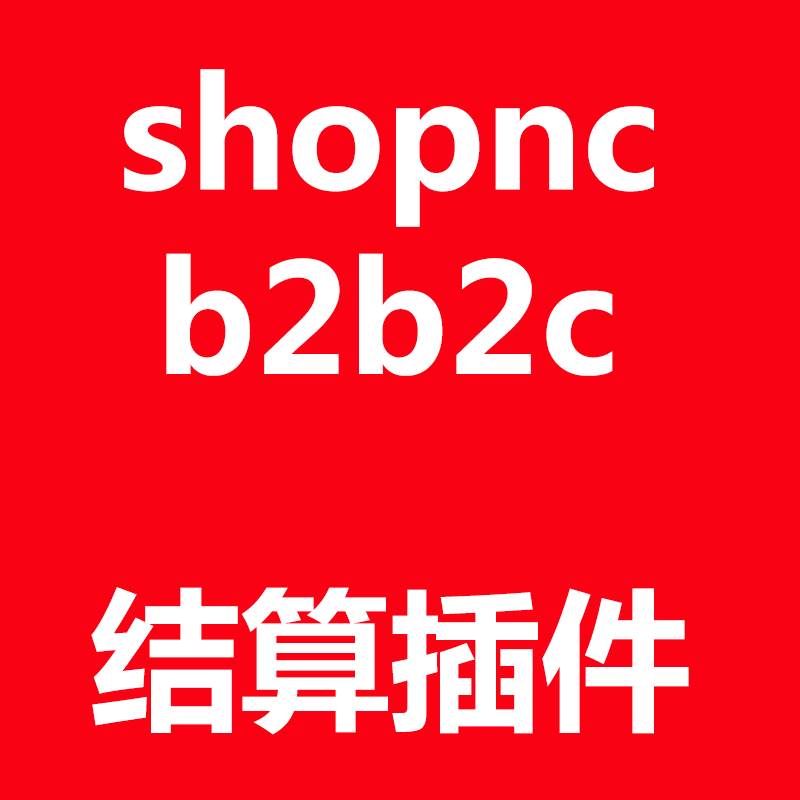
<style>
.page{position:relative;width:800px;height:800px;background:#fa0213}
.page>*{position:absolute;margin:0}
.t1{font:150px "MicrosoftYaHei-Bold";color:#ffffff}
</style>
<div class="page">
<p class="t1" style="left:124px;top:69px;width:530px;height:158px">shopnc</p>
<p class="t1" style="left:166px;top:253px;width:447px;height:123px">b2b2c</p>
<p class="t1" style="left:91px;top:587px;width:598px;height:148px">结算插件</p>
</div>
